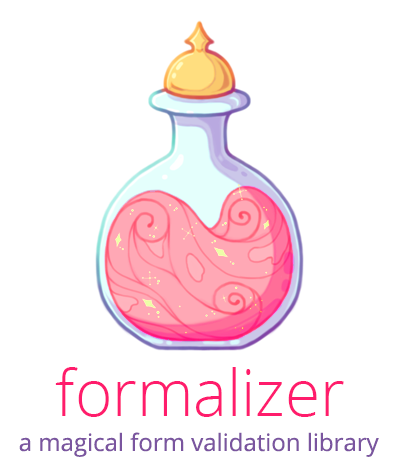
<style>
.page{position:relative;width:400px;height:472px;background:#ffffff}
.page>*{position:absolute;margin:0}
.t1{font:63.7px "OpenSans-Light";color:#ff1c6c}
.t2{font:24px "OpenSans-Regular";color:#7a559f}
</style>
<div class="page">
<p class="t1" style="left:55px;top:367px;width:289px;height:50px">formalizer</p>
<p class="t2" style="left:19px;top:432px;width:360px;height:25px">a magical form validation library</p>
</div>
